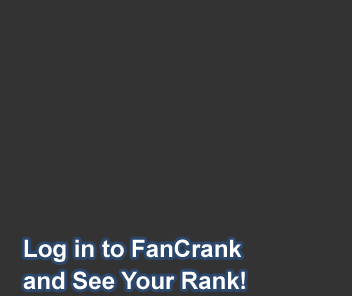
<style>
.page{position:relative;width:352px;height:296px;background:#333333}
.page>*{position:absolute;margin:0}
.t1{font:24px/32px "Arial-BoldMT";color:#ffffff}
</style>
<div class="page">
<p class="t1" style="left:23px;top:239px;width:222px;height:51px">Log in to FanCrank <br>and See Your Rank!</p>
</div>
